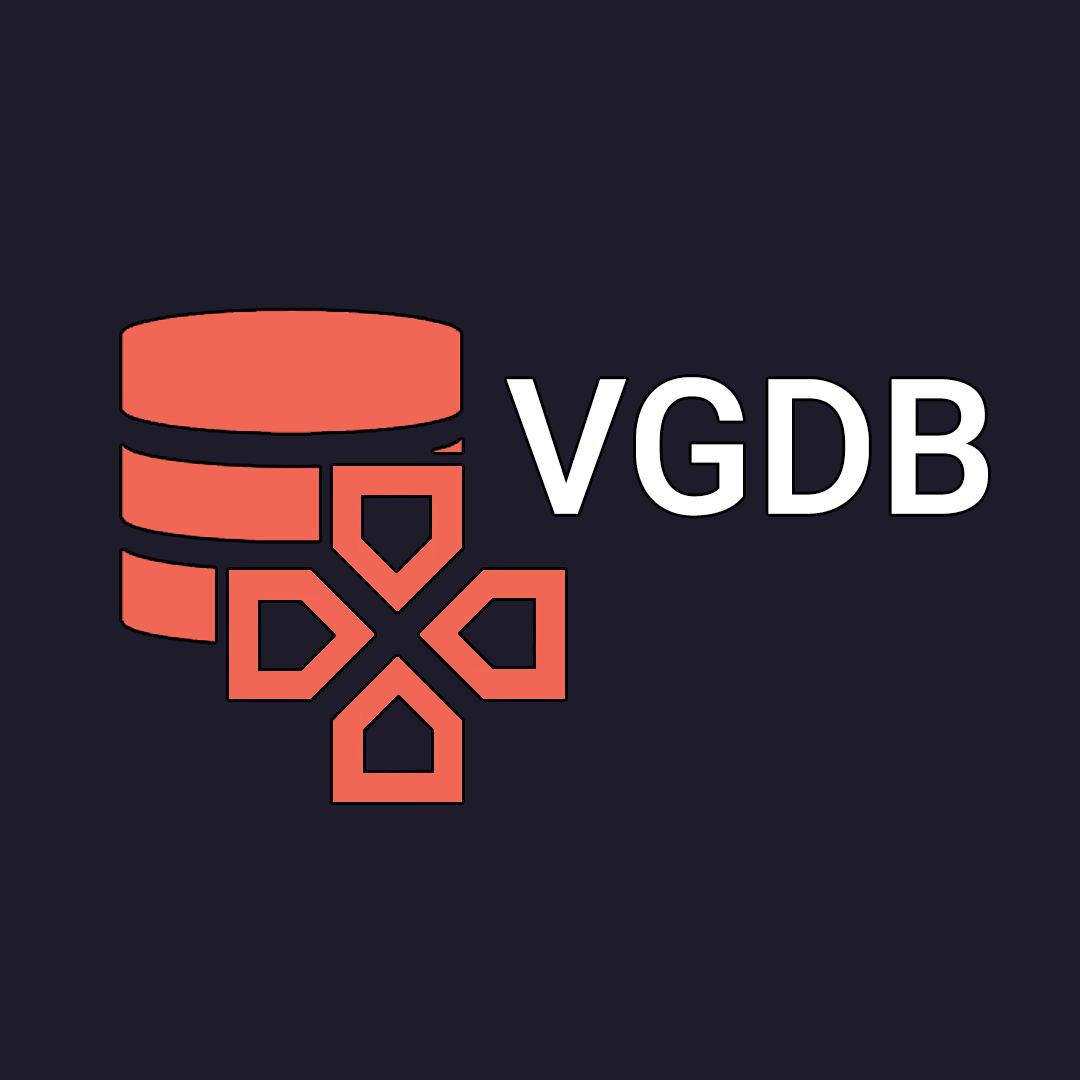
<style>
.page{position:relative;width:1080px;height:1080px;background:#1e1b2b}
.page>*{position:absolute;margin:0}
.t1{font:189px "Roboto-Medium";color:#ffffff}
</style>
<div class="page">
<p class="t1" style="left:506px;top:377px;width:482px;height:139px">VGDB</p>
</div>
